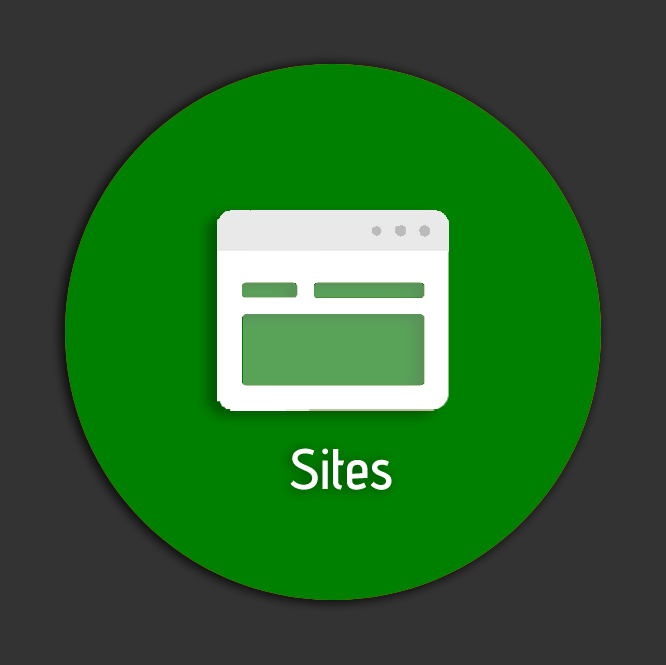
<style>
.page{position:relative;width:666px;height:665px;background:#333333}
.page>*{position:absolute;margin:0}
.t1{font:57px "AdventPro-SemiBold";color:#ffffff}
</style>
<div class="page">
<p class="t1" style="left:290px;top:448px;width:102px;height:42px">Sites</p>
</div>
